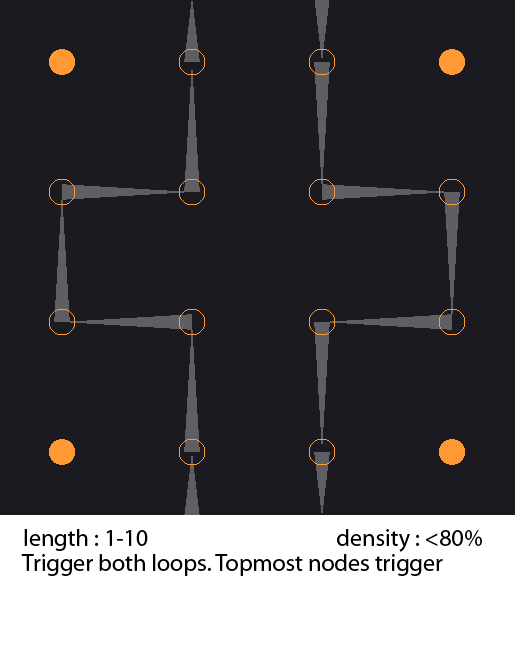
<style>
.page{position:relative;width:515px;height:648px;background:#1a1a20}
.page>*{position:absolute;margin:0}
.t1{font:24px "MyriadPro-Regular";color:#000000}
</style>
<div class="page">
<p class="t1" style="left:24px;top:529px;width:458px;height:23px">length : 1-10                                     density : &lt;80%</p>
<p class="t1" style="left:21px;top:554px;width:422px;height:22px">Trigger both loops. Topmost nodes trigger</p>
</div>
